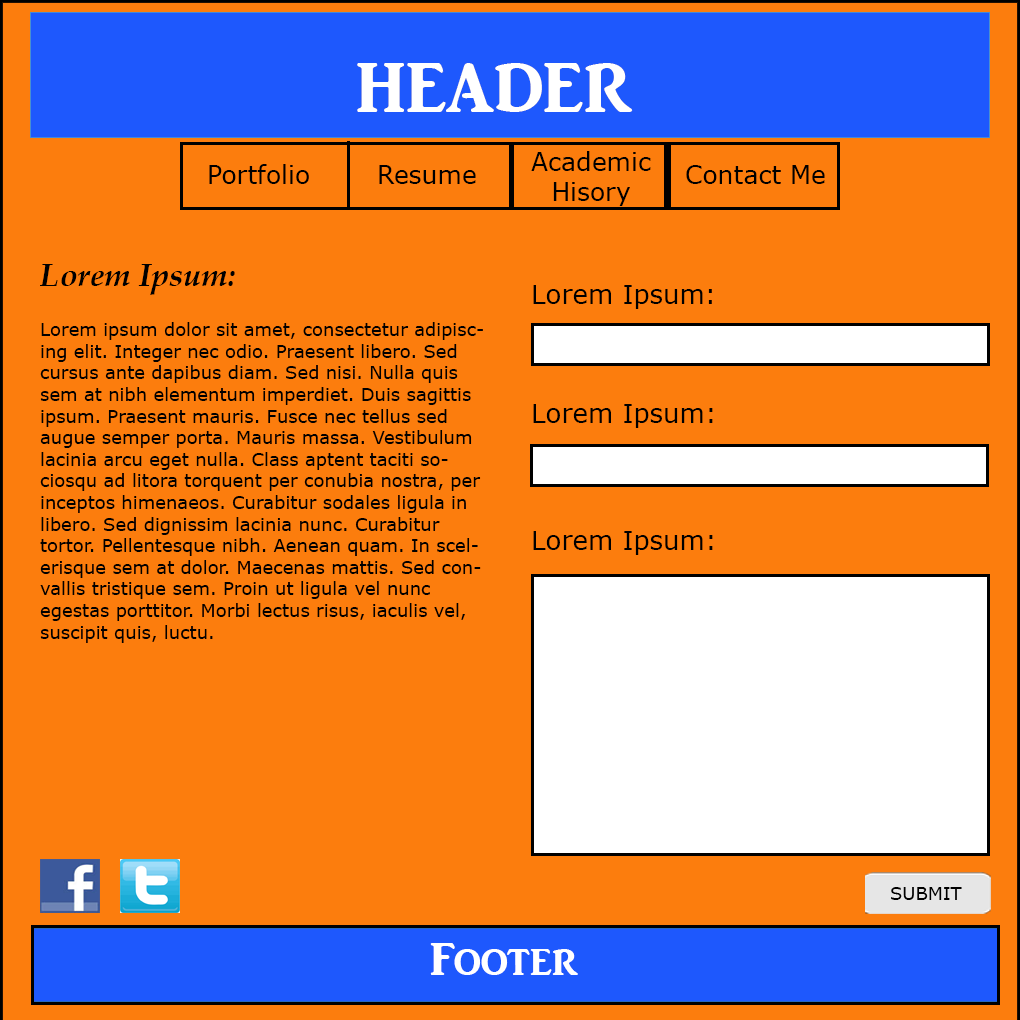
<style>
.page{position:relative;width:1020px;height:1020px;background:#fc7d0d}
.page>*{position:absolute;margin:0}
.t1{font:72px "ARJULIAN";color:#ffffff}
.t2{font:25px "Verdana";color:#000000}
.t3{font:32px "BookAntiqua-BoldItalic";color:#000000}
.t4{font:26px "Verdana";color:#000000}
.t5{font:18px "Verdana";color:#000000}
.t6{font:48px "ARJULIAN";color:#ffffff}
</style>
<div class="page">
<p class="t1" style="left:357px;top:63px;width:276px;height:49px">HEADER</p>
<p class="t1" style="left:357px;top:63px;width:276px;height:49px">HEADER</p>
<p class="t2" style="left:531px;top:151px;width:120px;height:55px;text-align:center">Academic<br>Hisory</p>
<p class="t2" style="left:209px;top:164px;width:100px;height:20px">Portfolio</p>
<p class="t2" style="left:379px;top:165px;width:97px;height:19px">Resume</p>
<p class="t2" style="left:686px;top:165px;width:139px;height:19px">Contact Me</p>
<p class="t3" style="left:40px;top:264px;width:195px;height:31px">Lorem Ipsum:</p>
<p class="t4" style="left:533px;top:285px;width:179px;height:24px">Lorem Ipsum:</p>
<p class="t5" style="left:40px;top:322px;width:443px;height:321px">Lorem ipsum dolor sit amet, consectetur adipiscing elit. Integer nec odio. Praesent libero. Sed cursus ante dapibus diam. Sed nisi. Nulla quis sem at nibh elementum imperdiet. Duis sagittis ipsum. Praesent mauris. Fusce nec tellus sed augue semper porta. Mauris massa. Vestibulum lacinia arcu eget nulla. Class aptent taciti sociosqu ad litora torquent per conubia nostra, per inceptos himenaeos. Curabitur sodales ligula in libero. Sed dignissim lacinia nunc. Curabitur tortor. Pellentesque nibh. Aenean quam. In scelerisque sem at dolor. Maecenas mattis. Sed convallis tristique sem. Proin ut ligula vel nunc egestas porttitor. Morbi lectus risus, iaculis vel, suscipit quis, luctu.</p>
<p class="t4" style="left:533px;top:404px;width:180px;height:24px">Lorem Ipsum:</p>
<p class="t4" style="left:533px;top:531px;width:180px;height:24px">Lorem Ipsum:</p>
<p class="t5" style="left:891px;top:887px;width:71px;height:13px">SUBMIT</p>
<p class="t6" style="left:430px;top:943px;width:148px;height:32px">Footer</p>
</div>
